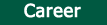
<style>
.page{position:relative;width:107px;height:25px;background:#005941}
.page>*{position:absolute;margin:0}
.t1{font:18px "Tahoma";letter-spacing:0.02em;color:#ffffff;font-weight:bold}
</style>
<div class="page">
<p class="t1" style="left:24px;top:3px;width:57px;height:15px">Career</p>
</div>
